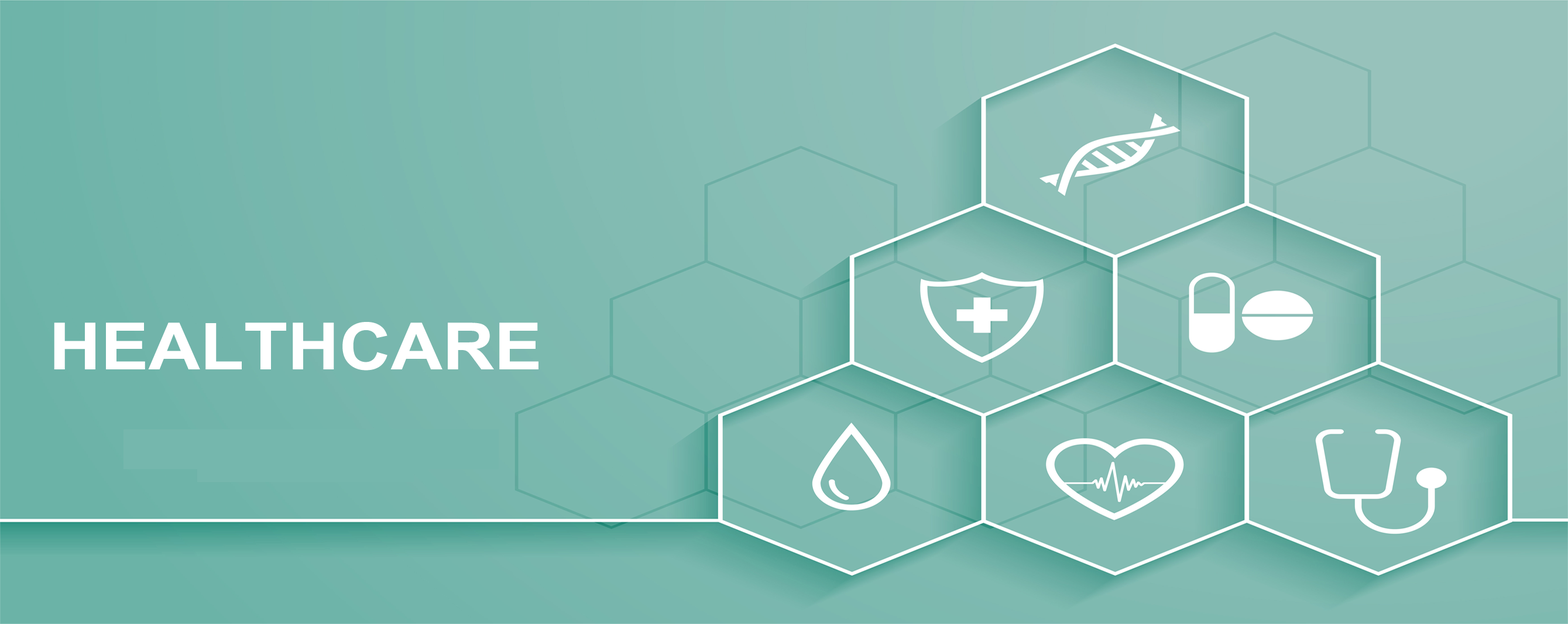
<style>
.page{position:relative;width:1568px;height:624px}
.page>*{position:absolute;margin:0}
.t1{font:65px "Arial-BoldMT";color:#ffffff;scale:1.1 1}
</style>
<div class="page">
<p class="t1" style="left:54px;top:322px;width:484px;height:48px">HEALTHCARE</p>
</div>
